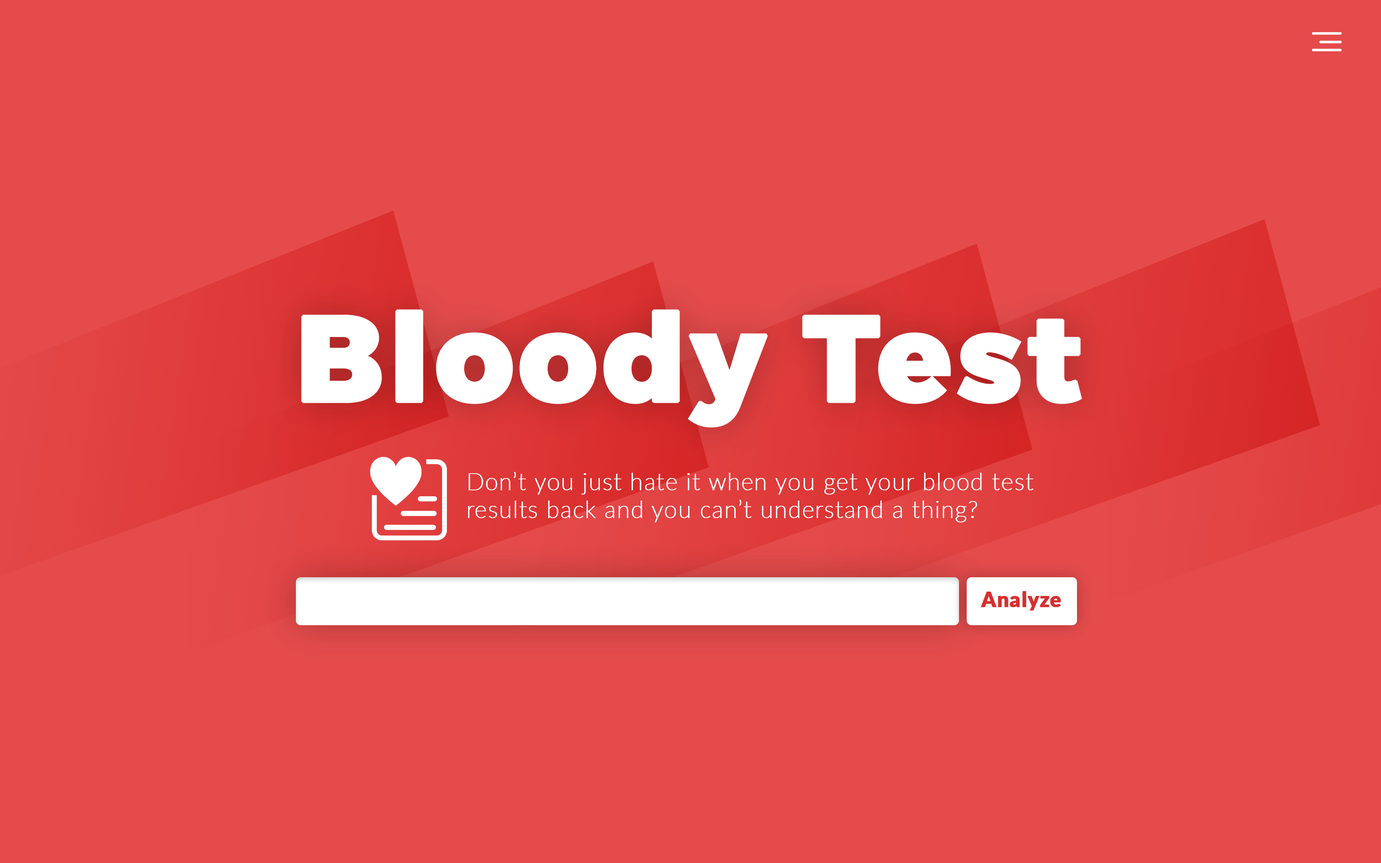
<style>
.page{position:relative;width:1381px;height:863px;background:#e54b4b}
.page>*{position:absolute;margin:0}
.t1{font:121.3px "Montserrat-ExtraBold";letter-spacing:0.02em;color:#ffffff;font-weight:bold}
.t2{font:23.5px "Lato-Thin";letter-spacing:0.02em;color:#ffffff;font-weight:bold}
.t3{font:20.6px "Lato-Black";letter-spacing:0.02em;color:#d92e2e;font-weight:bold}
</style>
<div class="page">
<p class="t1" style="left:301px;top:309px;width:781px;height:119px">Bloody Test</p>
<p class="t2" style="left:468px;top:472px;width:566px;height:51px">Don’t you just hate it when you get your blood test<br>results back and you can’t understand a thing?</p>
<p class="t3" style="left:981px;top:591px;width:80px;height:20px">Analyze</p>
</div>
